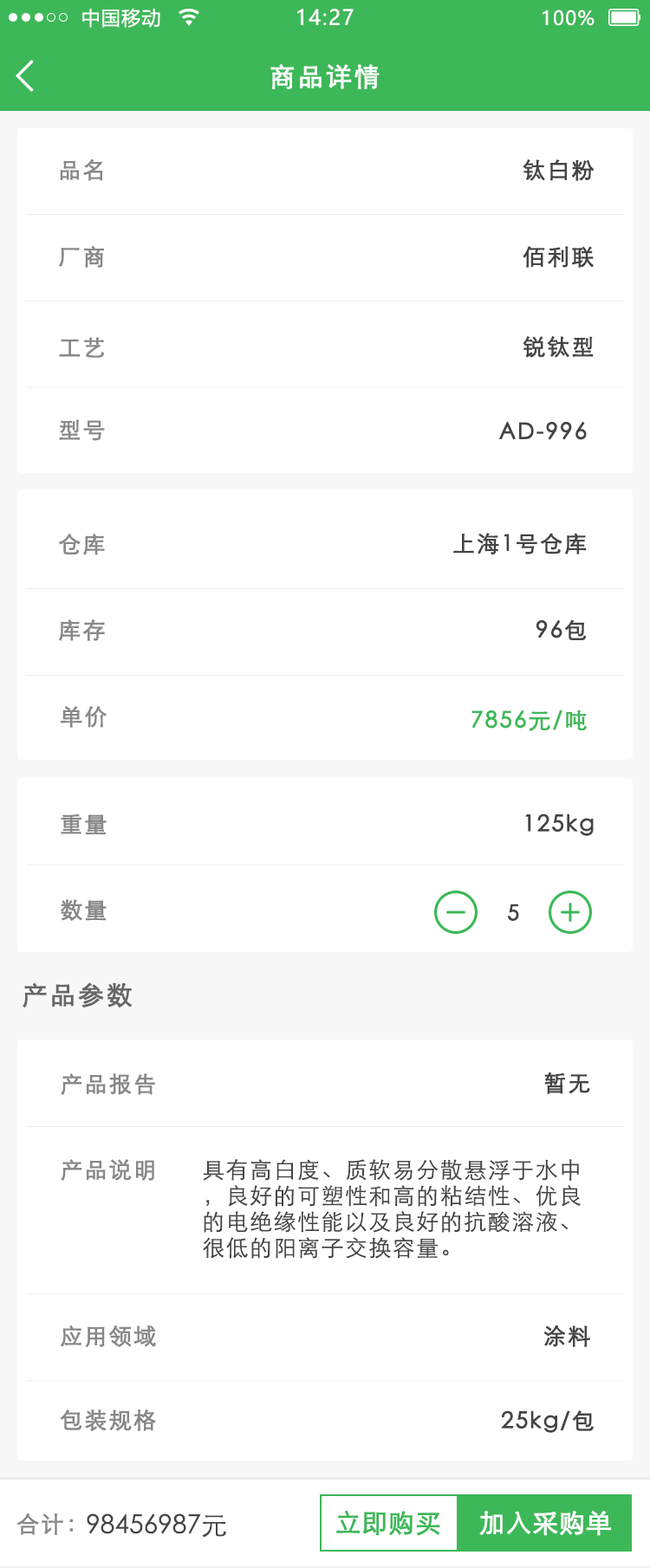
<style>
.page{position:relative;width:650px;height:1568px;background:#ffffff}
.page>*{position:absolute;margin:0}
.t1{font:19.1px "MicrosoftYaHei";letter-spacing:0.06em;color:#ffffff}
.t2{font:20.8px "MicrosoftYaHei";letter-spacing:0.06em;color:#ffffff}
.t3{font:43.2px "NSimSun";letter-spacing:0.06em;color:#fefffe;font-weight:bold}
.t4{font:26px "STXihei";letter-spacing:0.06em;color:#fefffe;font-weight:bold}
.t5{font:22.5px "STXihei";letter-spacing:0.06em;color:#888888;font-weight:bold}
.t6{font:22.4px "STXihei";letter-spacing:0.06em;color:#444444;font-weight:bold}
.t7{font:22.4px "STXihei";letter-spacing:0.06em;color:#3db858;font-weight:bold}
.t8{font:21.6px "STXihei";letter-spacing:0.06em;color:#444444;font-weight:bold}
.t9{font:26px "STXihei";letter-spacing:0.06em;color:#666666;font-weight:bold}
.t10{font:22.4px/26px "STXihei";letter-spacing:0.06em;color:#444444}
.t11{font:26px "STXihei";color:#444444}
.t12{font:25.9px "STXihei";color:#3db858;font-weight:bold}
.t13{font:26px "STXihei";color:#ffffff;font-weight:bold}
</style>
<div class="page">
<p class="t1" style="left:82px;top:8px;width:78px;height:20px">中国移动</p>
<p class="t2" style="left:297px;top:9px;width:56px;height:17px">14:27</p>
<p class="t1" style="left:542px;top:10px;width:52px;height:16px">100%</p>
<p class="t3" style="left:16px;top:60px;width:18px;height:32px">&lt;</p>
<p class="t4" style="left:270px;top:64px;width:109px;height:25px">商品详情</p>
<p class="t5" style="left:60px;top:159px;width:43px;height:22px">品名</p>
<p class="t6" style="left:522px;top:159px;width:72px;height:22px">钛白粉</p>
<p class="t5" style="left:59px;top:245px;width:45px;height:23px">厂商</p>
<p class="t6" style="left:522px;top:246px;width:71px;height:22px">佰利联</p>
<p class="t5" style="left:59px;top:337px;width:46px;height:21px">工艺</p>
<p class="t6" style="left:522px;top:336px;width:71px;height:22px">锐钛型</p>
<p class="t5" style="left:59px;top:419px;width:46px;height:22px">型号</p>
<p class="t6" style="left:499px;top:421px;width:87px;height:19px">AD-996</p>
<p class="t5" style="left:59px;top:534px;width:46px;height:21px">仓库</p>
<p class="t6" style="left:453px;top:533px;width:133px;height:21px">上海1号仓库</p>
<p class="t5" style="left:59px;top:619px;width:46px;height:22px">库存</p>
<p class="t6" style="left:536px;top:619px;width:50px;height:21px">96包</p>
<p class="t5" style="left:61px;top:706px;width:46px;height:22px">单价</p>
<p class="t7" style="left:471px;top:709px;width:115px;height:22px">7856元/吨</p>
<p class="t5" style="left:61px;top:813px;width:46px;height:22px">重量</p>
<p class="t6" style="left:525px;top:813px;width:68px;height:23px">125kg</p>
<p class="t5" style="left:61px;top:899px;width:46px;height:22px">数量</p>
<p class="t8" style="left:507px;top:904px;width:12px;height:17px">5</p>
<p class="t9" style="left:23px;top:982px;width:109px;height:26px">产品参数</p>
<p class="t5" style="left:61px;top:1073px;width:94px;height:22px">产品报告</p>
<p class="t6" style="left:544px;top:1072px;width:46px;height:22px">暂无</p>
<p class="t5" style="left:61px;top:1159px;width:93px;height:22px">产品说明</p>
<p class="t10" style="left:203px;top:1159px;width:377px;height:100px">具有高白度、质软易分散悬浮于水中<br>，良好的可塑性和高的粘结性、优良<br>的电绝缘性能以及良好的抗酸溶液、<br>很低的阳离子交换容量。</p>
<p class="t5" style="left:61px;top:1325px;width:95px;height:22px">应用领域</p>
<p class="t6" style="left:543px;top:1325px;width:47px;height:22px">涂料</p>
<p class="t5" style="left:61px;top:1409px;width:95px;height:22px">包装规格</p>
<p class="t6" style="left:501px;top:1410px;width:92px;height:23px">25kg/包</p>
<p class="t5" style="left:16px;top:1513px;width:57px;height:22px">合计：</p>
<p class="t11" style="left:87px;top:1513px;width:139px;height:25px">98456987元</p>
<p class="t12" style="left:336px;top:1510px;width:104px;height:26px">立即购买</p>
<p class="t13" style="left:479px;top:1510px;width:132px;height:26px">加入采购单</p>
</div>
